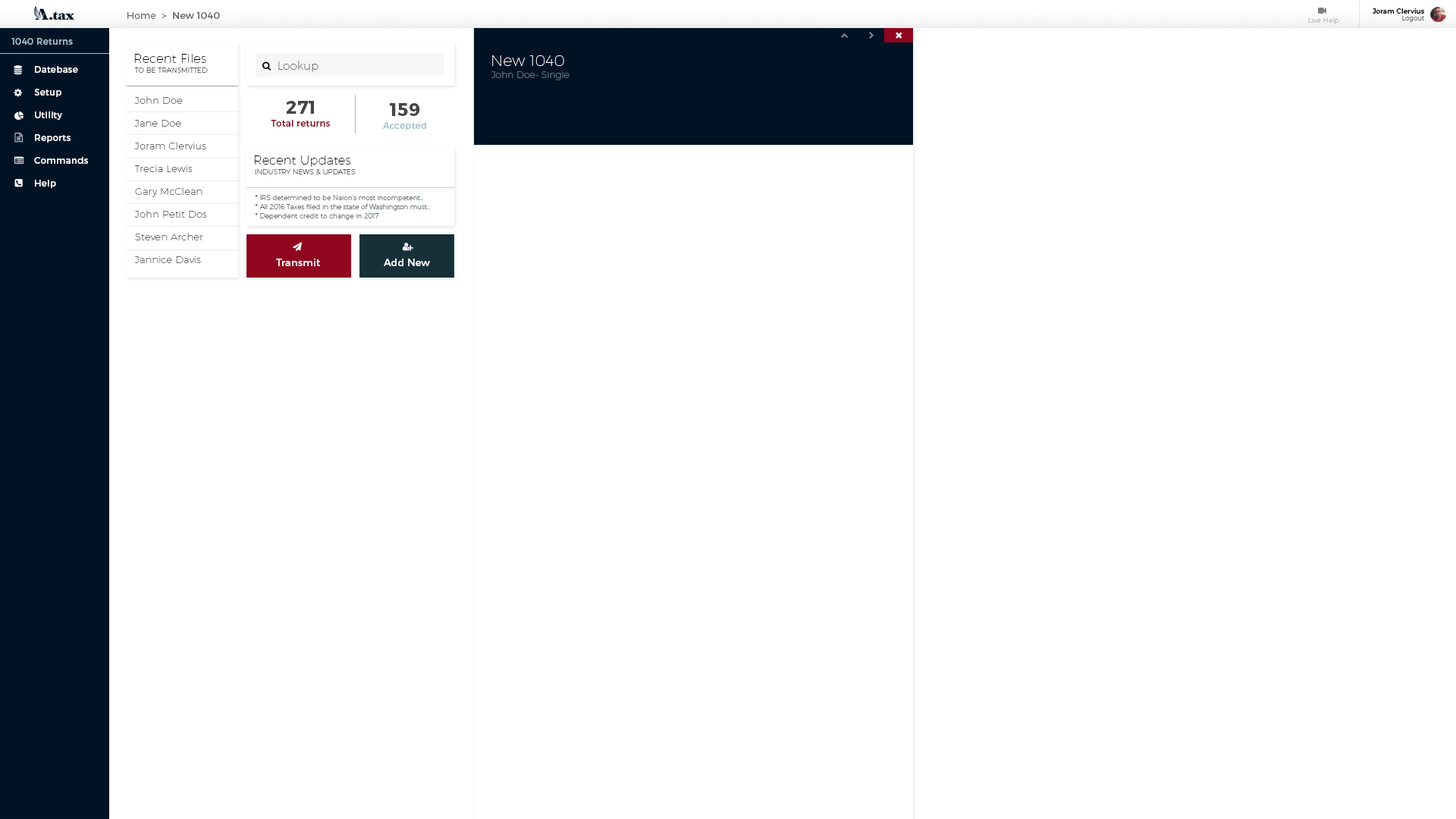
<style>
.page{position:relative;width:1456px;height:819px;background:#ffffff}
.page>*{position:absolute;margin:0}
.t1{font:9.5px "Montserrat-Regular";letter-spacing:0.02em;color:#6c6c6c}
.t2{font:9.5px "Montserrat-Light";letter-spacing:0.02em;color:#6c6c6c}
.t3{font:6.8px "Montserrat-Hairline";letter-spacing:0.02em}
.t4{font:6.8px/6.8px "Montserrat-Regular";letter-spacing:0.02em;color:#000000}
.t5{font:6.4px/6.8px "Montserrat-Hairline";letter-spacing:0.02em;color:#000000}
.t6{font:9.1px "Montserrat-Regular";letter-spacing:0.02em;color:#a3c1c9}
.t7{font:12.1px "Montserrat-Hairline";letter-spacing:0.02em;color:#000000}
.t8{font:9.1px/22.7px "Montserrat-Regular";letter-spacing:0.02em;color:#ffffff}
.t9{font:11.4px "Montserrat-Hairline";letter-spacing:0.02em}
.t10{font:15.2px "Montserrat-Hairline";letter-spacing:0.02em;color:#ffffff}
.t11{font:6.8px "Montserrat-Hairline";letter-spacing:0.02em;text-transform:uppercase}
.t12{font:9.1px "Montserrat-Hairline";letter-spacing:0.02em}
.t13{font:9.9px/22.7px "Montserrat-Hairline";letter-spacing:0.02em}
.t14{font:18.2px "Montserrat-Bold";letter-spacing:0.02em;color:#454545}
.t15{font:9.1px "Montserrat-Regular";letter-spacing:0.02em;color:#8f061e}
.t16{font:6.8px/9.1px "Montserrat-Hairline"}
.t17{font:9.9px "Montserrat-Regular";letter-spacing:0.02em;color:#fefefe}
</style>
<div class="page">
<p class="t1" style="left:127px;top:12px;width:93px;height:7px"><span class="t2">Home  &gt;  </span>New 1040</p>
<p class="t3" style="left:1308px;top:17px;width:31px;height:7px">Live Help</p>
<p class="t4" style="left:1373px;top:8px;width:51px;height:14px;text-align:right">Joram Clervius<br><span class="t5">Logout</span></p>
<p class="t6" style="left:11px;top:38px;width:62px;height:7px">1040 Returns</p>
<p class="t7" style="left:134px;top:54px;width:72px;height:9px">Recent Files</p>
<p class="t8" style="left:34px;top:66px;width:54px;height:122px">Datebase<br>Setup<br>Utility<br>Reports<br>Commands<br>Help</p>
<p class="t9" style="left:278px;top:61px;width:40px;height:11px">Lookup</p>
<p class="t10" style="left:492px;top:55px;width:72px;height:11px">New 1040</p>
<p class="t11" style="left:134px;top:67px;width:74px;height:6px">To be transmitted</p>
<p class="t12" style="left:491px;top:71px;width:79px;height:9px">John Doe- Single</p>
<p class="t13" style="left:134px;top:96px;width:73px;height:167px">John Doe<br>Jane Doe<br>Joram Clervius<br>Trecia Lewis<br>Gary McClean<br>John Petit Dos<br>Steven Archer<br>Jannice Davis</p>
<p class="t14" style="left:286px;top:101px;width:28px;height:13px">271</p>
<p class="t14" style="left:390px;top:103px;width:30px;height:13px">159</p>
<p class="t15" style="left:271px;top:120px;width:59px;height:7px">Total returns</p>
<p class="t6" style="left:383px;top:122px;width:43px;height:8px">Accepted</p>
<p class="t7" style="left:254px;top:155px;width:97px;height:12px">Recent Updates</p>
<p class="t11" style="left:255px;top:169px;width:101px;height:5px">industry news &amp; updates</p>
<p class="t16" style="left:255px;top:195px;width:176px;height:25px">* IRS determined to be Naion’s most incompetent...<br>* All 2016 Taxes filed in the state of Washington must...<br>* Dependent credit to change in 2017</p>
<p class="t17" style="left:276px;top:259px;width:44px;height:7px">Transmit</p>
<p class="t17" style="left:384px;top:259px;width:46px;height:7px">Add New</p>
</div>
